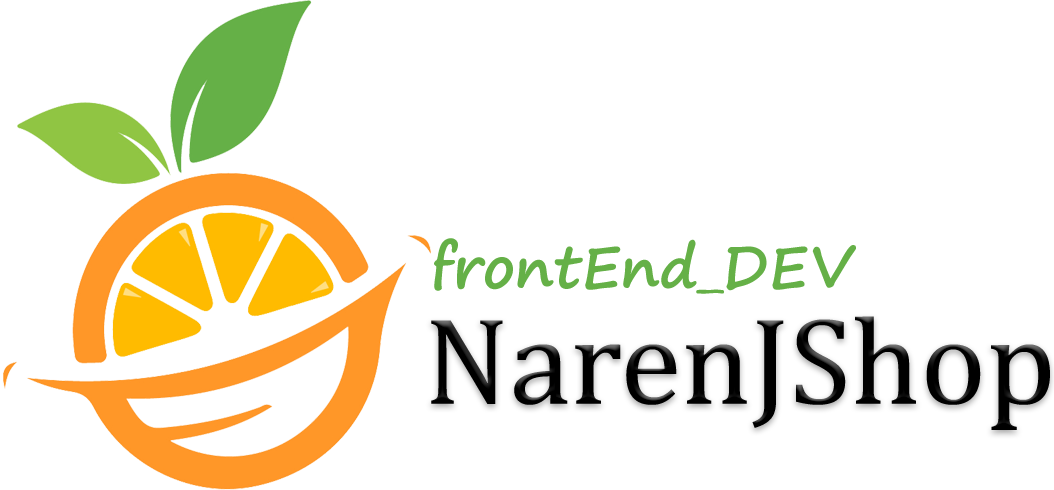
<style>
.page{position:relative;width:1054px;height:490px;background:#ffffff}
.page>*{position:absolute;margin:0}
.t1{font:58.3px "SegoePrint-Bold";color:#65b047}
.t2{font:125px "CambriaMath";color:#000000}
</style>
<div class="page">
<p class="t1" style="left:434px;top:238px;width:422px;height:56px">frontEnd_DEV</p>
<p class="t2" style="left:431px;top:316px;width:619px;height:114px">NarenJShop</p>
</div>
